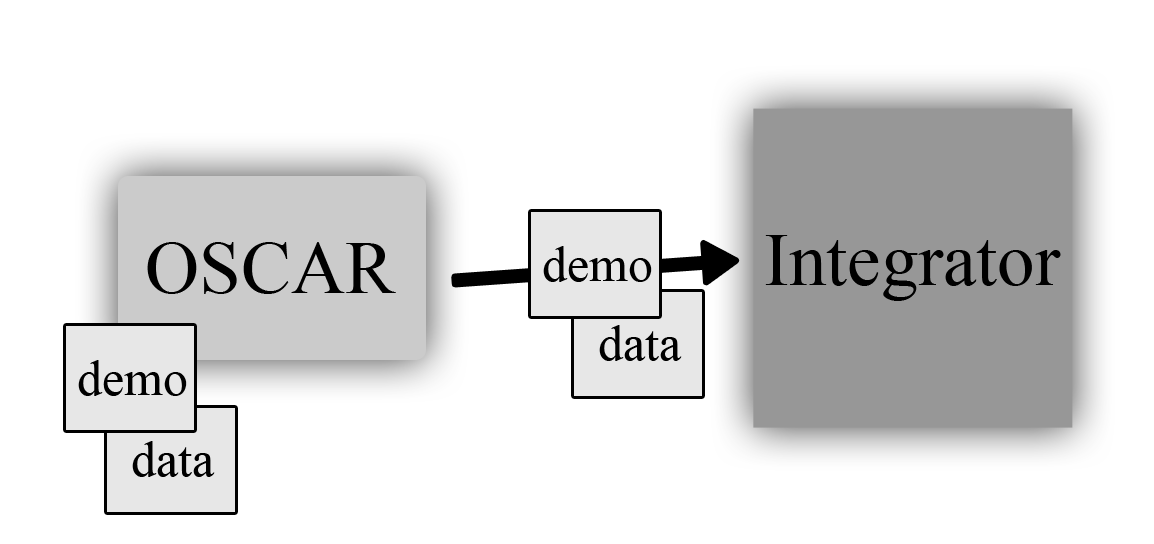
<style>
.page{position:relative;width:1154px;height:544px;background:#ffffff}
.page>*{position:absolute;margin:0}
.t1{font:75px "TimesNewRomanPSMT";color:#000000}
.t2{font:50px "TimesNewRomanPSMT";color:#000000}
</style>
<div class="page">
<p class="t1" style="left:147px;top:242px;width:249px;height:52px">OSCAR</p>
<p class="t2" style="left:543px;top:246px;width:109px;height:36px">demo</p>
<p class="t1" style="left:765px;top:235px;width:296px;height:66px">Integrator</p>
<p class="t2" style="left:599px;top:325px;width:83px;height:36px">data</p>
<p class="t2" style="left:78px;top:360px;width:109px;height:36px">demo</p>
<p class="t2" style="left:132px;top:441px;width:83px;height:36px">data</p>
</div>
